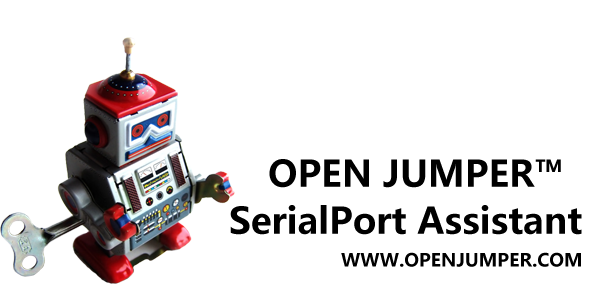
<style>
.page{position:relative;width:600px;height:300px;background:#ffffff}
.page>*{position:absolute;margin:0}
.t1{font:36px "MicrosoftYaHei-Bold";color:#000000}
.t2{font:18px "MicrosoftYaHei-Bold";color:#000000}
</style>
<div class="page">
<p class="t1" style="left:269px;top:159px;width:292px;height:29px">OPEN JUMPER™</p>
<p class="t1" style="left:230px;top:205px;width:352px;height:30px">SerialPort Assistant</p>
<p class="t2" style="left:341px;top:252px;width:240px;height:15px">WWW.OPENJUMPER.COM</p>
</div>
